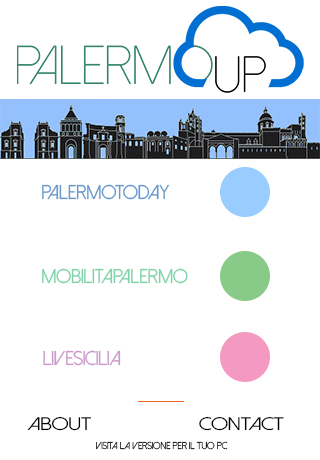
<style>
.page{position:relative;width:320px;height:460px;background:#ffffff}
.page>*{position:absolute;margin:0}
.t1{font:20px "DolceVita";color:#6699cc}
.t2{font:20px "DolceVita";color:#7fd3a9}
.t3{font:20px "DolceVita";color:#cc99cc}
.t4{font:18.2px "DolceVita";color:#000000;scale:1.23 1}
.t5{font:10px "DolceVita";color:#000000}
</style>
<div class="page">
<p class="t1" style="left:42px;top:184px;width:128px;height:16px">PalermoToday</p>
<p class="t2" style="left:42px;top:268px;width:146px;height:16px">MobilitaPalermo</p>
<p class="t3" style="left:43px;top:350px;width:78px;height:16px">Livesicilia</p>
<p class="t4" style="left:27px;top:416px;width:64px;height:15px">About</p>
<p class="t4" style="left:199px;top:416px;width:85px;height:15px">Contact</p>
<p class="t5" style="left:96px;top:441px;width:132px;height:9px">Visita la versione per il tuo pc</p>
</div>
